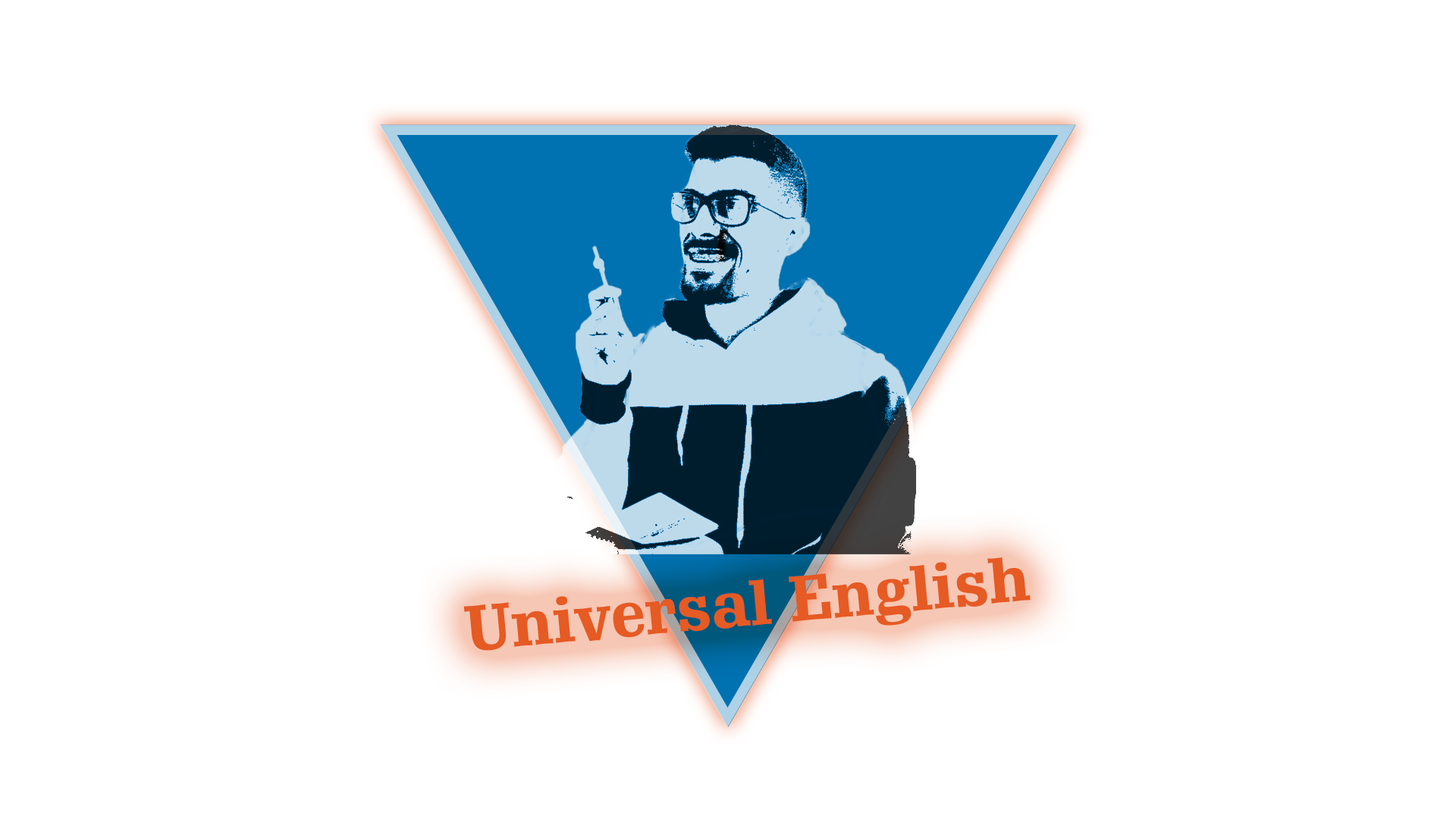
<style>
.page{position:relative;width:1456px;height:819px;background:#ffffff}
.page>*{position:absolute;margin:0}
.t1{font:63.2px "SchadowBT-Bold";color:#e65a24}
</style>
<div class="page">
<p class="t1" style="left:463px;top:557px;width:568px;height:94px;rotate:-5deg">Universal English</p>
</div>
